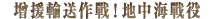
<style>
.page{position:relative;width:214px;height:19px;background:#ffffff}
.page>*{position:absolute;margin:0}
.t1{font:18px "RyuminPr6N-ExBold";letter-spacing:0.1em;font-weight:bold;scale:0.8 1}
</style>
<div class="page">
<p class="t1" style="left:13px;top:1px;width:188px;height:18px">增援輸送作戰！地中海戰役</p>
</div>
